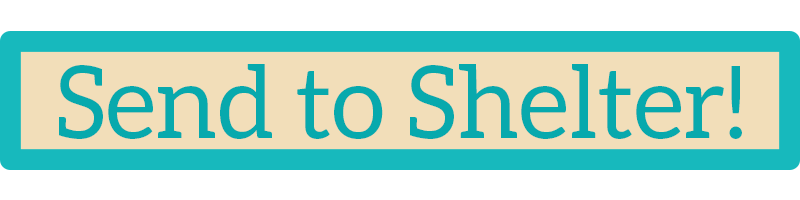
<style>
.page{position:relative;width:800px;height:200px;background:#f2deb9}
.page>*{position:absolute;margin:0}
.t1{font:100px "Aleo-Regular";color:#07a9ad}
</style>
<div class="page">
<p class="t1" style="left:59px;top:64px;width:683px;height:75px">Send to Shelter!</p>
</div>
